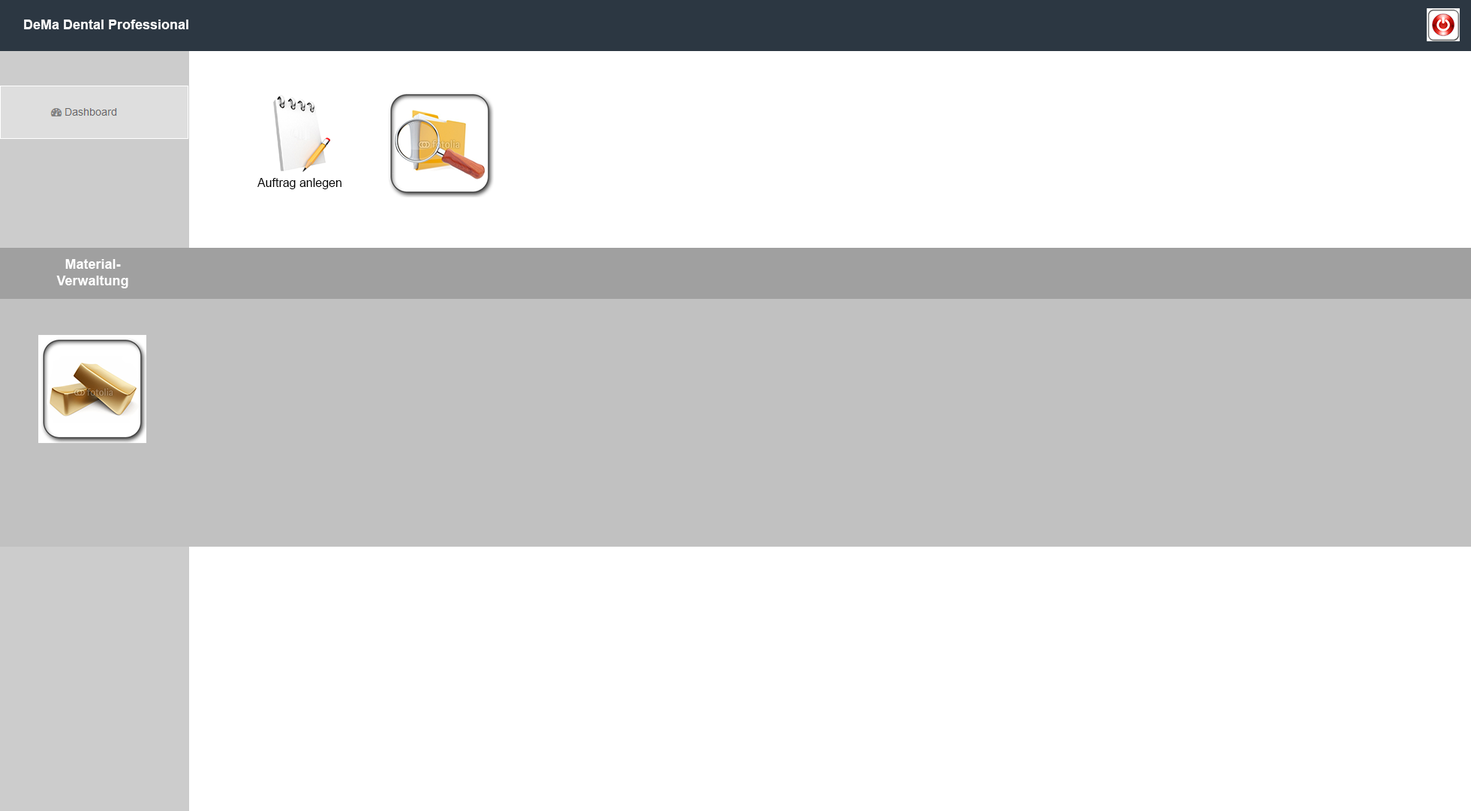
<style>
.page{position:relative;width:1471px;height:811px;background:#ffffff}
.page>*{position:absolute;margin:0}
.t1{font:13.5px "Arial-BoldMT";color:#ffffff}
.t2{font:12px "ArialMT";color:#000000}
</style>
<div class="page">
<p class="t1" style="left:24px;top:20px;width:164px;height:9px">DeMa Dental Professional</p>
<p class="t2" style="left:257px;top:178px;width:84px;height:11px">Auftrag anlegen</p>
<p class="t1" style="left:56px;top:259px;width:72px;height:29px;text-align:center">Material-<br>Verwaltung</p>
</div>
